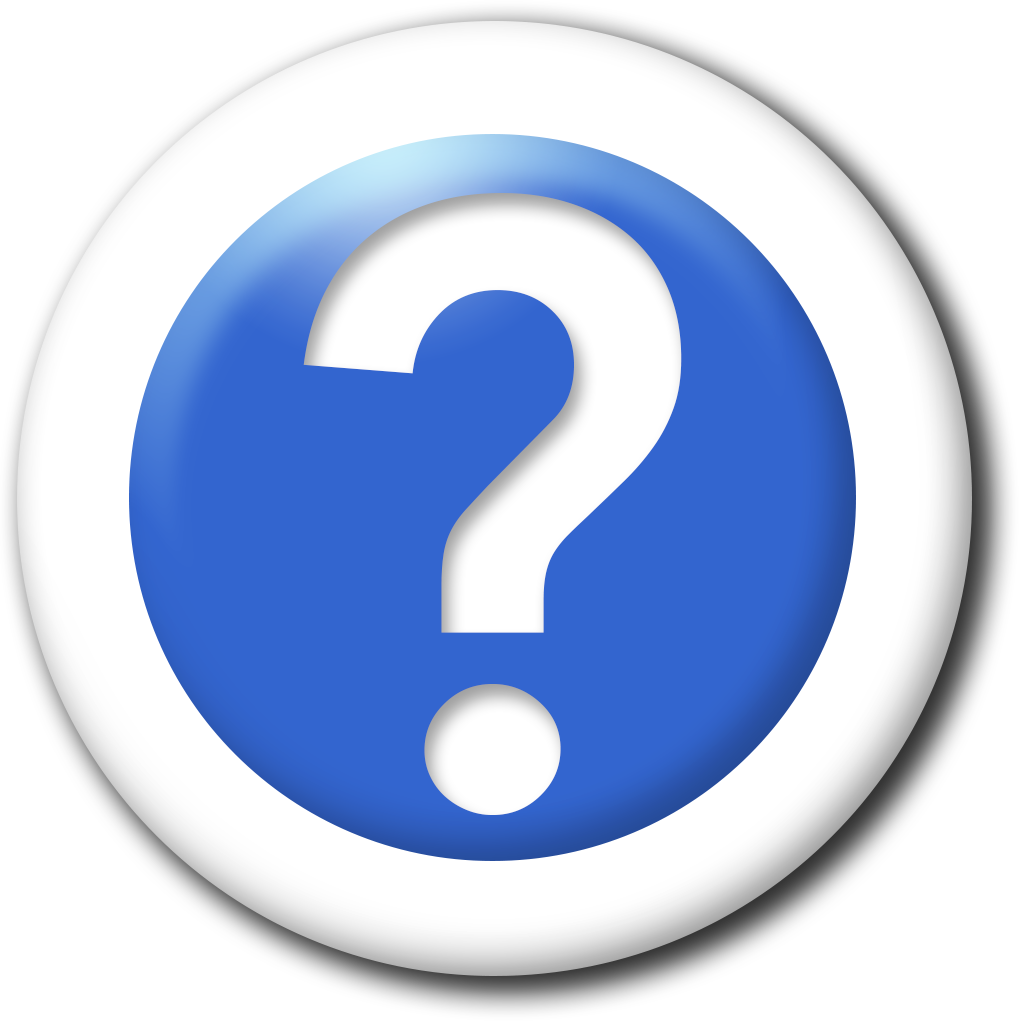
<style>
.page{position:relative;width:1024px;height:1024px;background:#ffffff}
.page>*{position:absolute;margin:0}
.t1{font:850px "Avenir-Heavy";letter-spacing:-0.025em;color:#ffffff}
</style>
<div class="page">
<p class="t1" style="left:303px;top:193px;width:379px;height:622px">?</p>
</div>
